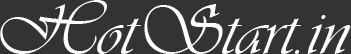
<style>
.page{position:relative;width:351px;height:54px;background:#333333}
.page>*{position:absolute;margin:0}
.t1{font:72px "Vivaldii";color:#ffffff}
</style>
<div class="page">
<p class="t1" style="left:0px;top:0px;width:351px;height:54px">HotStart.in</p>
</div>
